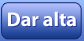
<style>
.page{position:relative;width:84px;height:41px}
.page>*{position:absolute;margin:0}
.t1{font:20px "MyriadPro-Bold";color:#ffffff}
</style>
<div class="page">
<p class="t1" style="left:8px;top:11px;width:68px;height:16px">Dar alta</p>
</div>
